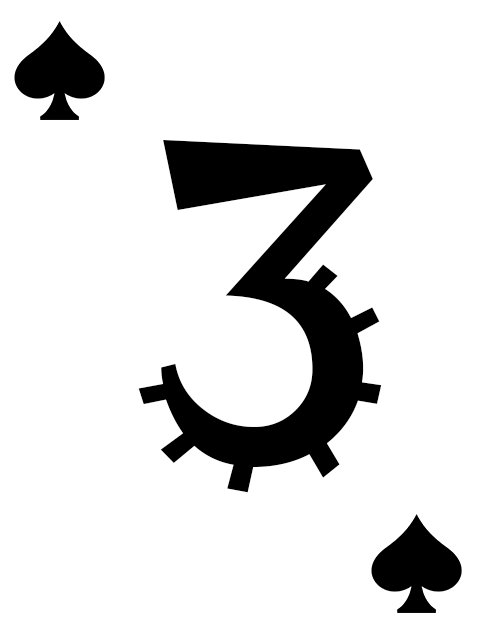
<style>
.page{position:relative;width:480px;height:640px;background:#ffffff}
.page>*{position:absolute;margin:0}
.t1{font:386.3px "Jokerman-Regular";color:#000000}
</style>
<div class="page">
<p class="t1" style="left:138px;top:140px;width:244px;height:353px">3</p>
</div>
